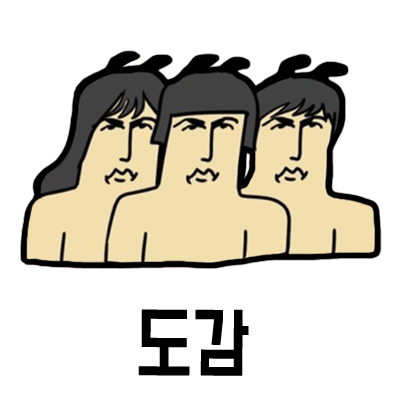
<style>
.page{position:relative;width:400px;height:400px;background:#ffffff}
.page>*{position:absolute;margin:0}
.t1{font:69.8px "BMDoHyeon";color:#000000;scale:0.84 1}
</style>
<div class="page">
<p class="t1" style="left:138px;top:309px;width:111px;height:67px">도감</p>
</div>
